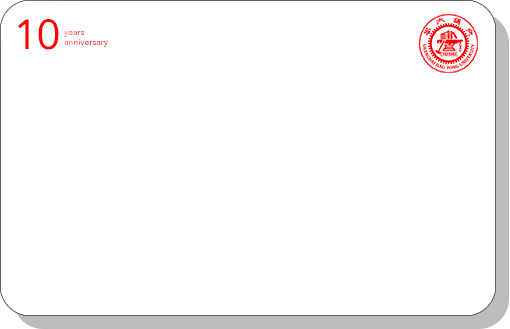
<style>
.page{position:relative;width:510px;height:329px;background:#ffffff}
.page>*{position:absolute;margin:0}
.t1{font:41.6px "Avenir-Roman";color:#ff0000}
.t2{font:8.6px "Avenir-Roman"}
</style>
<div class="page">
<p class="t1" style="left:17px;top:19px;width:42px;height:31px">10</p>
<p class="t2" style="left:64px;top:31px;width:44px;height:16px">years<br>anniversary</p>
</div>
